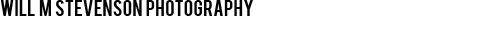
<style>
.page{position:relative;width:500px;height:35px;background:#ffffff}
.page>*{position:absolute;margin:0}
.t1{font:18px "Bebas";color:#040404}
</style>
<div class="page">
<p class="t1" style="left:0px;top:0px;width:253px;height:16px">WILL  M  STEVENSON  PHOTOGRAPHY</p>
</div>
